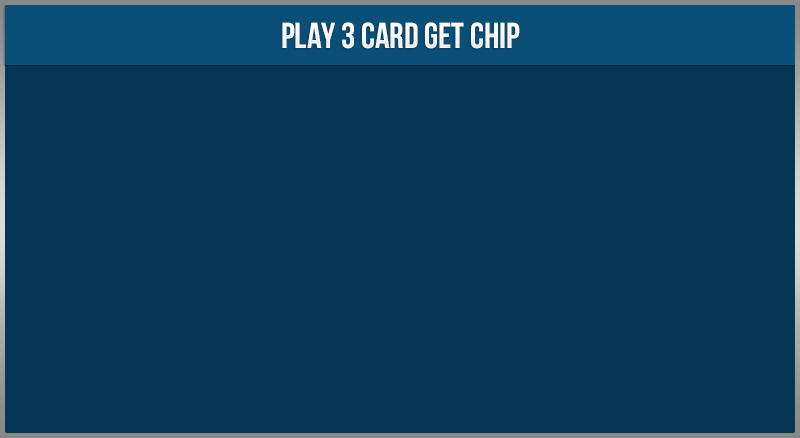
<style>
.page{position:relative;width:800px;height:438px;background:#053754}
.page>*{position:absolute;margin:0}
.t1{font:36px "UTM-Bebas";color:#ffffff}
</style>
<div class="page">
<p class="t1" style="left:282px;top:22px;width:238px;height:27px">play 3 card get chip</p>
</div>
